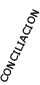
<style>
.page{position:relative;width:40px;height:85px;background:#ffffff}
.page>*{position:absolute;margin:0}
.t1{font:10px "Verdana";color:#000000;font-weight:bold}
</style>
<div class="page">
<p class="t1" style="left:0px;top:9px;width:40px;height:73px;rotate:-65deg">CONCILIACION</p>
</div>
